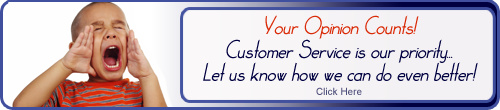
<style>
.page{position:relative;width:500px;height:110px}
.page>*{position:absolute;margin:0}
.t1{font:18px "Claritty_Italic";color:#da2b08}
.t2{font:18px "Claritty_Italic";color:#000040}
.t3{font:1px "Claritty_Italic";color:#000040}
.t4{font:10px "ArialMT";color:#50507c}
</style>
<div class="page">
<p class="t1" style="left:265px;top:15px;width:154px;height:24px">Your Opinion Counts!</p>
<p class="t2" style="left:203px;top:39px;width:275px;height:42px;text-align:center">Customer Service is our priority... <br><span class="t3">.<br></span>Let us know how we can do even better!</p>
<p class="t4" style="left:316px;top:87px;width:46px;height:8px">Click Here</p>
</div>
